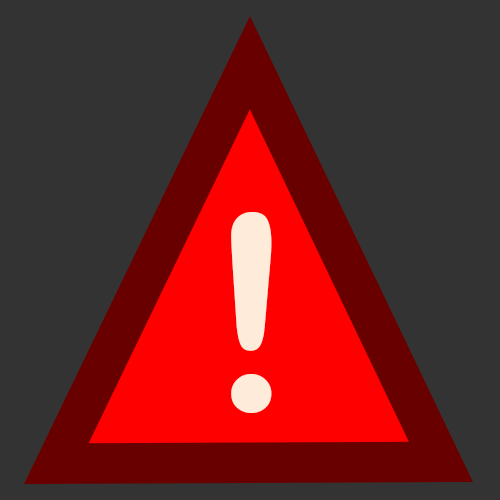
<style>
.page{position:relative;width:500px;height:500px;background:#333333}
.page>*{position:absolute;margin:0}
.t1{font:272px "ArialRoundedMTBold";color:#ffebd9}
</style>
<div class="page">
<p class="t1" style="left:231px;top:212px;width:41px;height:201px">!</p>
</div>
